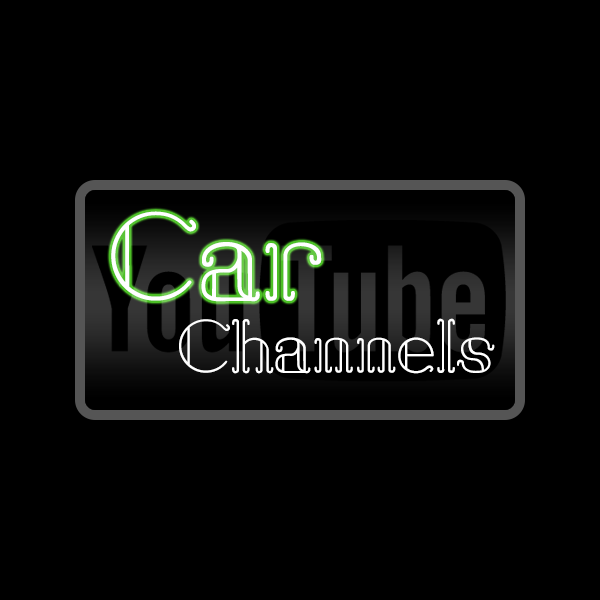
<style>
.page{position:relative;width:600px;height:600px;background:#000000}
.page>*{position:absolute;margin:0}
.t1{font:120px "SailAway";color:#ffffff}
.t2{font:72.3px "SailAway";color:#ffffff}
</style>
<div class="page">
<p class="t1" style="left:111px;top:211px;width:211px;height:91px">Car</p>
<p class="t2" style="left:179px;top:318px;width:316px;height:56px">Channels</p>
</div>
